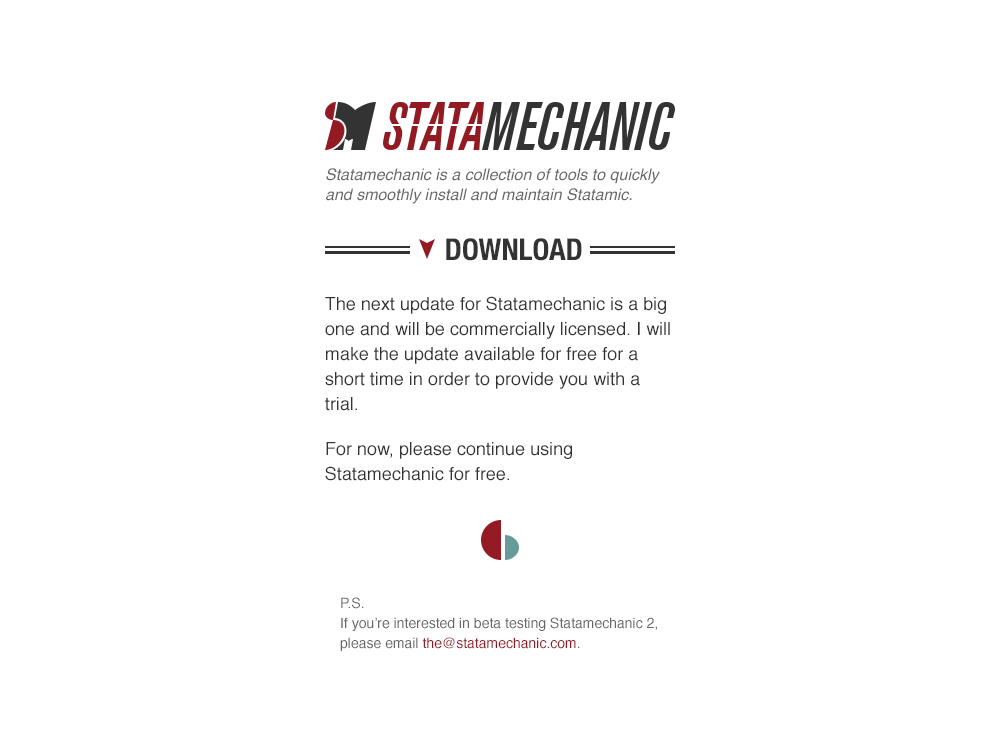
<style>
.page{position:relative;width:1000px;height:750px;background:#ffffff}
.page>*{position:absolute;margin:0}
.t1{font:16px/20px "Helvetica-Oblique";color:#666766}
.t2{font:30px "HelveticaNeue-CondensedBold";color:#333333;text-transform:uppercase}
.t3{font:18px/25px "Helvetica";color:#333333}
.t4{font:14px/20px "Helvetica";color:#666666}
.t5{font:14px/20px "Helvetica";color:#921a22}
</style>
<div class="page">
<p class="t1" style="left:326px;top:168px;width:334px;height:36px">Statamechanic is a collection of tools to quickly and smoothly install and maintain Statamic.</p>
<p class="t2" style="left:446px;top:238px;width:136px;height:23px">Download</p>
<p class="t3" style="left:325px;top:296px;width:345px;height:185px">The next update for Statamechanic is a big one and will be commercially licensed. I will make the update available for free for a short time in order to provide you with a trial.<br>For now, please continue using Statamechanic for free.</p>
<p class="t4" style="left:340px;top:597px;width:317px;height:54px">P.S.<br>If you’re interested in beta testing Statamechanic 2, please email <span class="t5">the@statamechanic.com</span>.</p>
</div>
